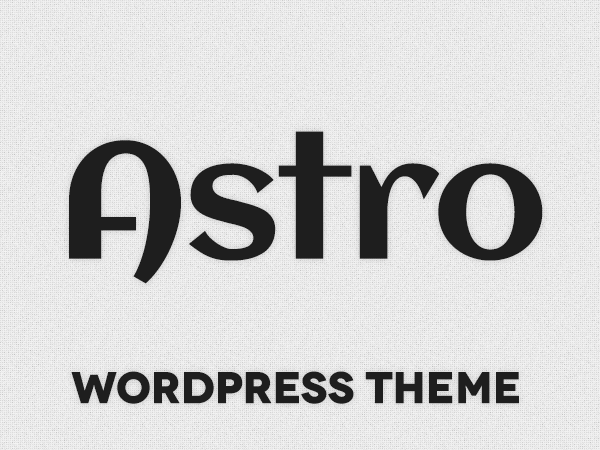
<style>
.page{position:relative;width:600px;height:450px}
.page>*{position:absolute;margin:0}
.t1{font:164.8px "Aclonica-Regular";letter-spacing:-0.025em;color:#1e1e1e}
.t2{font:44px "Novecentowide-Bold";letter-spacing:-0.026em;color:#1e1e1e;font-weight:bold}
</style>
<div class="page">
<p class="t1" style="left:69px;top:131px;width:474px;height:153px">Astro</p>
<p class="t2" style="left:71px;top:371px;width:448px;height:33px">WORDPRESS Theme</p>
</div>
